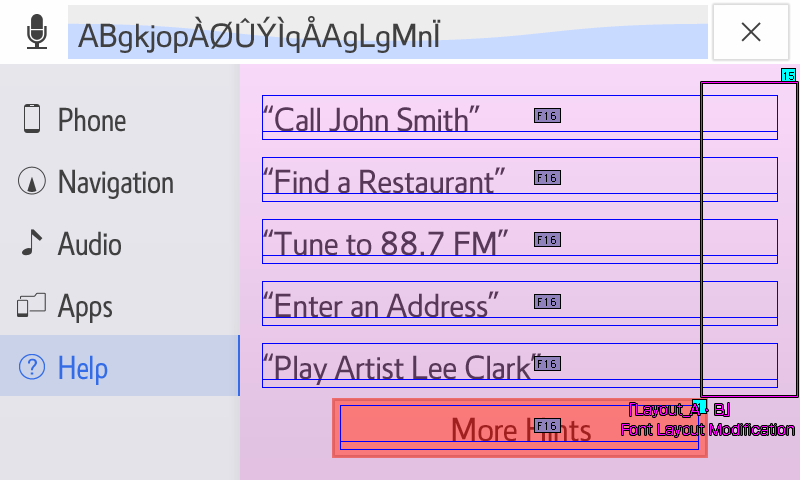
<style>
.page{position:relative;width:800px;height:480px}
.page>*{position:absolute;margin:0}
.t1{font:30px "Tfont1502_T1S";color:#404041}
.t2{font:30px "Tfont1502_T2S";color:#404041}
.t3{font:30px/62px "Tfont1502_T1S";color:#583859}
.t4{font:30px "Tfont1502_T2S";color:#336ce6}
.t5{font:14px/20px "ShinGoPro-Regular";color:#ff00ff}
.t6{font:30px "Tfont1502_T1S";color:#a02020}
</style>
<div class="page">
<p class="t1" style="left:78px;top:16px;width:363px;height:37px">ABgkjopÀØÛÝÌqÅAgLgMnÏ</p>
<p class="t2" style="left:59px;top:107px;width:67px;height:25px">Phone</p>
<p class="t3" style="left:263px;top:105px;width:278px;height:280px">“Call John Smith”<br>“Find a Restaurant”<br>“Tune to 88.7 FM”<br>“Enter an Address”<br>“Play Artist Lee Clark”</p>
<p class="t2" style="left:59px;top:169px;width:114px;height:30px">Navigation</p>
<p class="t2" style="left:57px;top:231px;width:64px;height:25px">Audio</p>
<p class="t2" style="left:57px;top:293px;width:55px;height:30px">Apps</p>
<p class="t4" style="left:59px;top:355px;width:49px;height:30px">Help</p>
<p class="t5" style="left:622px;top:403px;width:172px;height:34px">「Layout_A・B」<br>Font Layout Modification</p>
<p class="t6" style="left:452px;top:417px;width:139px;height:25px">More Hints</p>
</div>
